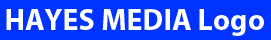
<style>
.page{position:relative;width:271px;height:40px;background:#0033ff}
.page>*{position:absolute;margin:0}
.t1{font:30px "MyriadPro-Bold";color:#ffffff}
</style>
<div class="page">
<p class="t1" style="left:6px;top:9px;width:258px;height:27px">HAYES MEDIA Logo</p>
</div>
